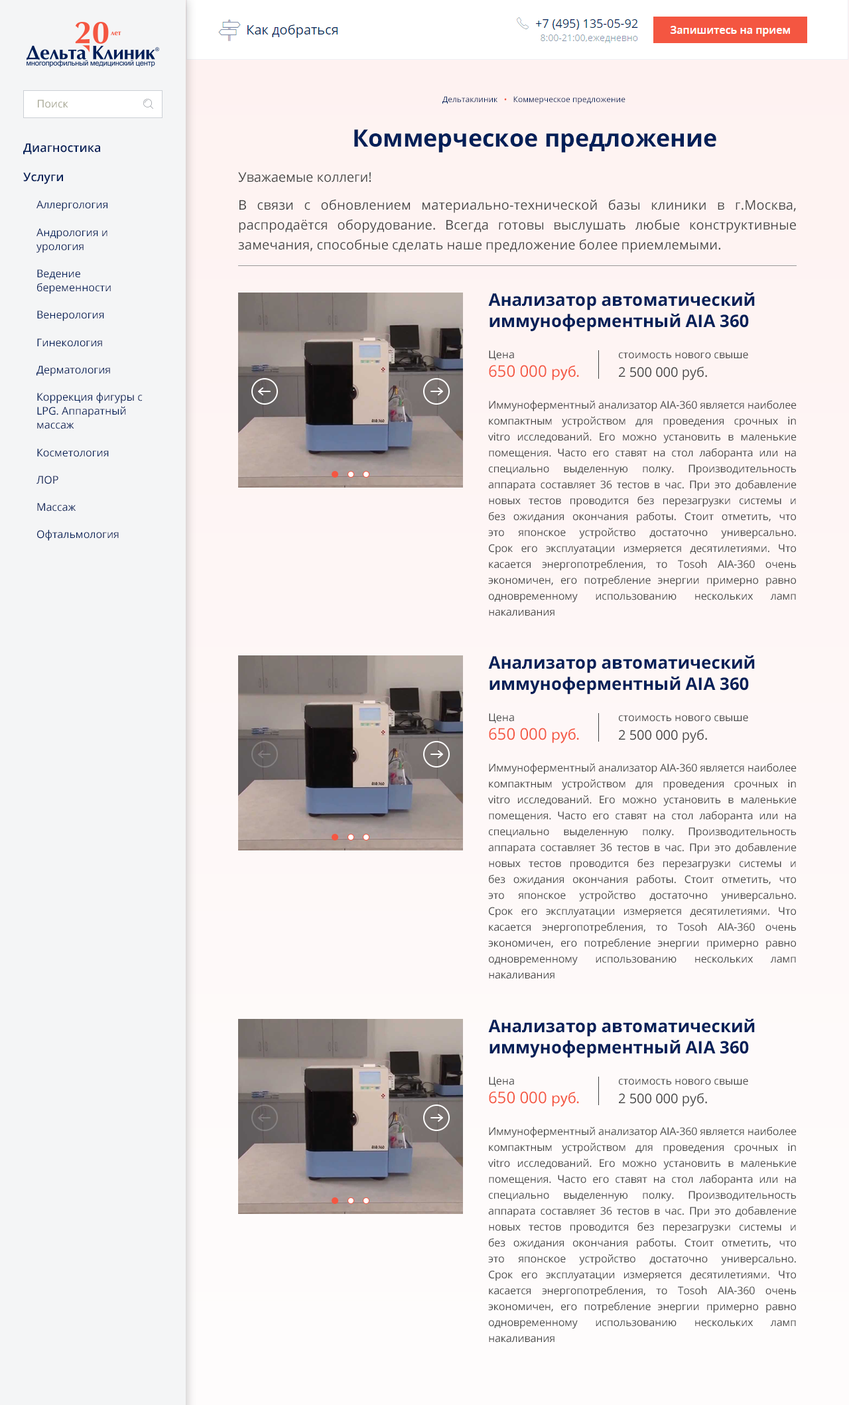
<style>
.page{position:relative;width:849px;height:1405px;background:#f4f5f6}
.page>*{position:absolute;margin:0}
.t1{font:10.6px "OpenSans";color:#a7a693}
.t2{font:8px "OpenSans";color:#011f58}
.t3{font:8px "OpenSans";color:#f45641}
.t4{font:23.9px "OpenSans-Bold";color:#011f58}
.t5{font:10.6px/14.1px "OpenSans";color:#011f58}
.t6{font:11.9px/13.3px "OpenSans-Semibold";color:#011f58}
.t7{font:13.3px/19.9px "OpenSans";color:#444444}
.t8{font:17.2px/21.2px "OpenSans-Bold";color:#011f58}
.t9{font:15.9px/18.6px "OpenSans";color:#f45641}
.t10{font:10.6px/18.6px "OpenSans";color:#444444}
.t11{font:15.9px/18.6px "MyriadPro-Regular";color:#f45641}
.t12{font:13.3px/18.6px "OpenSans";color:#444444}
.t13{font:10.6px/15.9px "OpenSans";color:#444444}
</style>
<div class="page">
<p class="t1" style="left:38px;top:99px;width:30px;height:9px">Поиск</p>
<p class="t2" style="left:442px;top:96px;width:183px;height:8px">Дельтаклиник   <span class="t3">•</span>   Коммерческое предложение</p>
<p class="t4" style="left:354px;top:129px;width:362px;height:24px">Коммерческое предложение</p>
<p class="t5" style="left:23px;top:143px;width:120px;height:398px"><span class="t6">Диагностика<br>Услуги<br></span>Аллергология<br>Андрология и<br>урология<br>Ведение<br>беременности<br>Венерология<br>Гинекология<br>Дерматология<br>Коррекция фигуры с <br>LPG. Аппаратный <br>массаж<br>Косметология<br>ЛОР<br>Массаж<br>Офтальмология</p>
<p class="t7" style="left:238px;top:172px;width:558px;height:81px;text-align:justify">Уважаемые коллеги!<br>В связи с обновлением материально-технической базы клиники в г.Москва,  распродаётся оборудование. Всегда готовы выслушать любые конструктивные замечания, способные сделать наше предложение более приемлемыми.</p>
<p class="t8" style="left:488px;top:292px;width:267px;height:40px">Анализатор автоматический<br>иммуноферментный AIA 360</p>
<p class="t9" style="left:489px;top:350px;width:90px;height:31px;text-align:justify"><span class="t10">Цена<br></span>650 000 <span class="t11">руб.</span></p>
<p class="t10" style="left:619px;top:352px;width:129px;height:28px;text-align:justify">стоимость нового свыше<br><span class="t12">2 500 000 руб.</span></p>
<p class="t13" style="left:488px;top:400px;width:309px;height:216px;text-align:justify">Иммуноферментный анализатор AIA-360 является наиболее компактным устройством для проведения срочных in vitro исследований. Его можно установить в маленькие помещения. Часто его ставят на стол лаборанта или на специально выделенную полку. Производительность аппарата составляет 36 тестов в час. При это добавление новых тестов проводится без перезагрузки системы и без ожидания окончания работы. Стоит отметить, что это японское устройство достаточно универсально. Срок его эксплуатации измеряется десятилетиями. Что касается энергопотребления, то Tosoh AIA-360 очень экономичен, его потребление энергии примерно равно одновременному использованию нескольких ламп накаливания</p>
<p class="t8" style="left:488px;top:655px;width:267px;height:39px">Анализатор автоматический<br>иммуноферментный AIA 360</p>
<p class="t9" style="left:489px;top:713px;width:90px;height:30px;text-align:justify"><span class="t10">Цена<br></span>650 000 <span class="t11">руб.</span></p>
<p class="t10" style="left:619px;top:715px;width:129px;height:28px;text-align:justify">стоимость нового свыше<br><span class="t12">2 500 000 руб.</span></p>
<p class="t13" style="left:488px;top:763px;width:309px;height:216px;text-align:justify">Иммуноферментный анализатор AIA-360 является наиболее компактным устройством для проведения срочных in vitro исследований. Его можно установить в маленькие помещения. Часто его ставят на стол лаборанта или на специально выделенную полку. Производительность аппарата составляет 36 тестов в час. При это добавление новых тестов проводится без перезагрузки системы и без ожидания окончания работы. Стоит отметить, что это японское устройство достаточно универсально. Срок его эксплуатации измеряется десятилетиями. Что касается энергопотребления, то Tosoh AIA-360 очень экономичен, его потребление энергии примерно равно одновременному использованию нескольких ламп накаливания</p>
<p class="t8" style="left:488px;top:1018px;width:267px;height:40px">Анализатор автоматический<br>иммуноферментный AIA 360</p>
<p class="t9" style="left:489px;top:1076px;width:90px;height:31px;text-align:justify"><span class="t10">Цена<br></span>650 000 <span class="t11">руб.</span></p>
<p class="t10" style="left:619px;top:1078px;width:129px;height:28px;text-align:justify">стоимость нового свыше<br><span class="t12">2 500 000 руб.</span></p>
<p class="t13" style="left:488px;top:1126px;width:309px;height:216px;text-align:justify">Иммуноферментный анализатор AIA-360 является наиболее компактным устройством для проведения срочных in vitro исследований. Его можно установить в маленькие помещения. Часто его ставят на стол лаборанта или на специально выделенную полку. Производительность аппарата составляет 36 тестов в час. При это добавление новых тестов проводится без перезагрузки системы и без ожидания окончания работы. Стоит отметить, что это японское устройство достаточно универсально. Срок его эксплуатации измеряется десятилетиями. Что касается энергопотребления, то Tosoh AIA-360 очень экономичен, его потребление энергии примерно равно одновременному использованию нескольких ламп накаливания</p>
</div>
